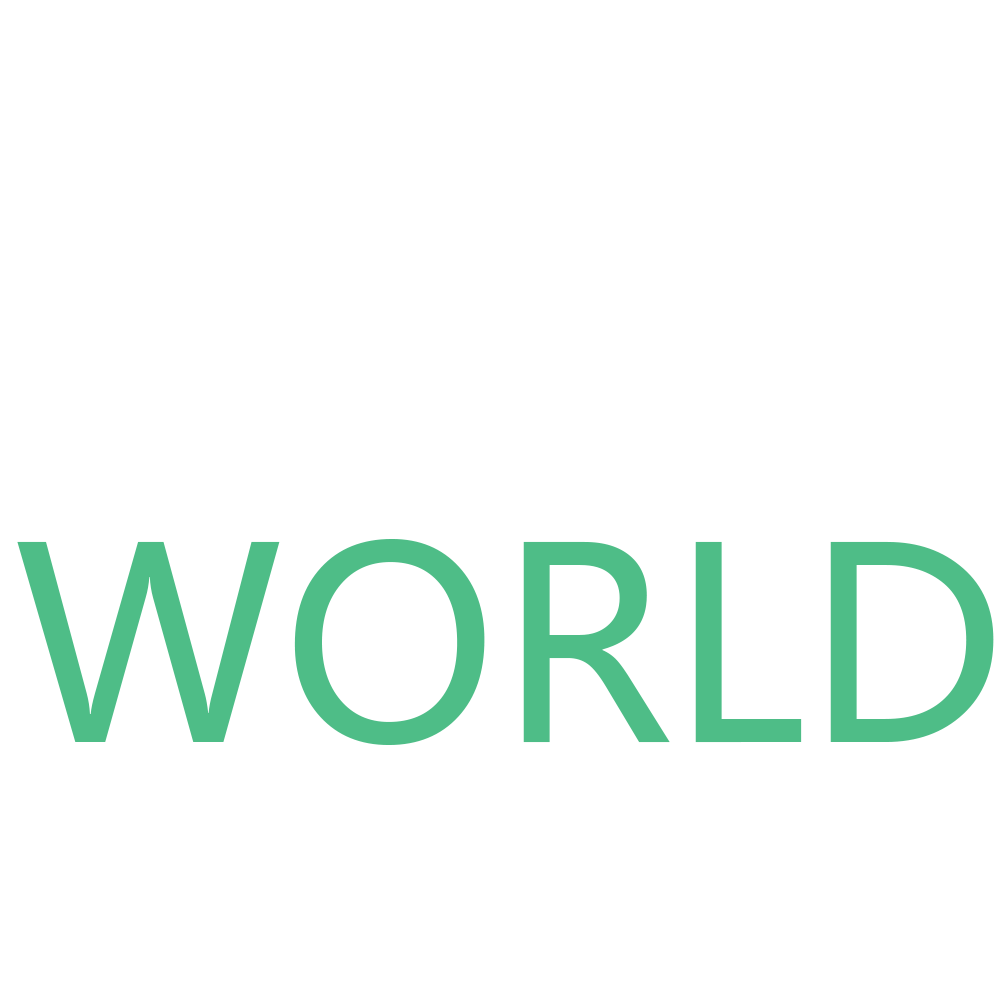
<style>
.page{position:relative;width:1007px;height:1003px;background:#ffffff}
.page>*{position:absolute;margin:0}
.t1{font:263.7px "MicrosoftYaHei";color:#4ebd87}
</style>
<div class="page">
<p class="t1" style="left:17px;top:538px;width:977px;height:207px">WORLD</p>
</div>
